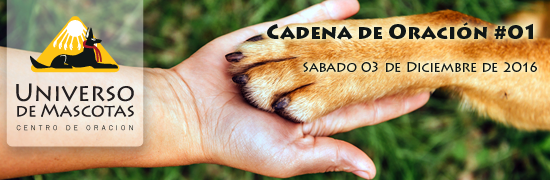
<style>
.page{position:relative;width:550px;height:180px}
.page>*{position:absolute;margin:0}
.t1{font:20px "LithosPro-Black";color:#101616}
.t2{font:14px "LithosPro-Regular";color:#101616}
</style>
<div class="page">
<p class="t1" style="left:267px;top:22px;width:266px;height:18px">Cadena de Oración #01</p>
<p class="t2" style="left:303px;top:61px;width:234px;height:11px">Sabado 03 de Diciembre de 2016</p>
</div>
